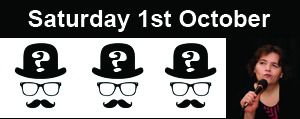
<style>
.page{position:relative;width:300px;height:119px;background:#ffffff}
.page>*{position:absolute;margin:0}
.t1{font:24px "Arial-BoldMT";color:#ffffff}
</style>
<div class="page">
<p class="t1" style="left:28px;top:10px;width:243px;height:22px">Saturday 1st October</p>
</div>
